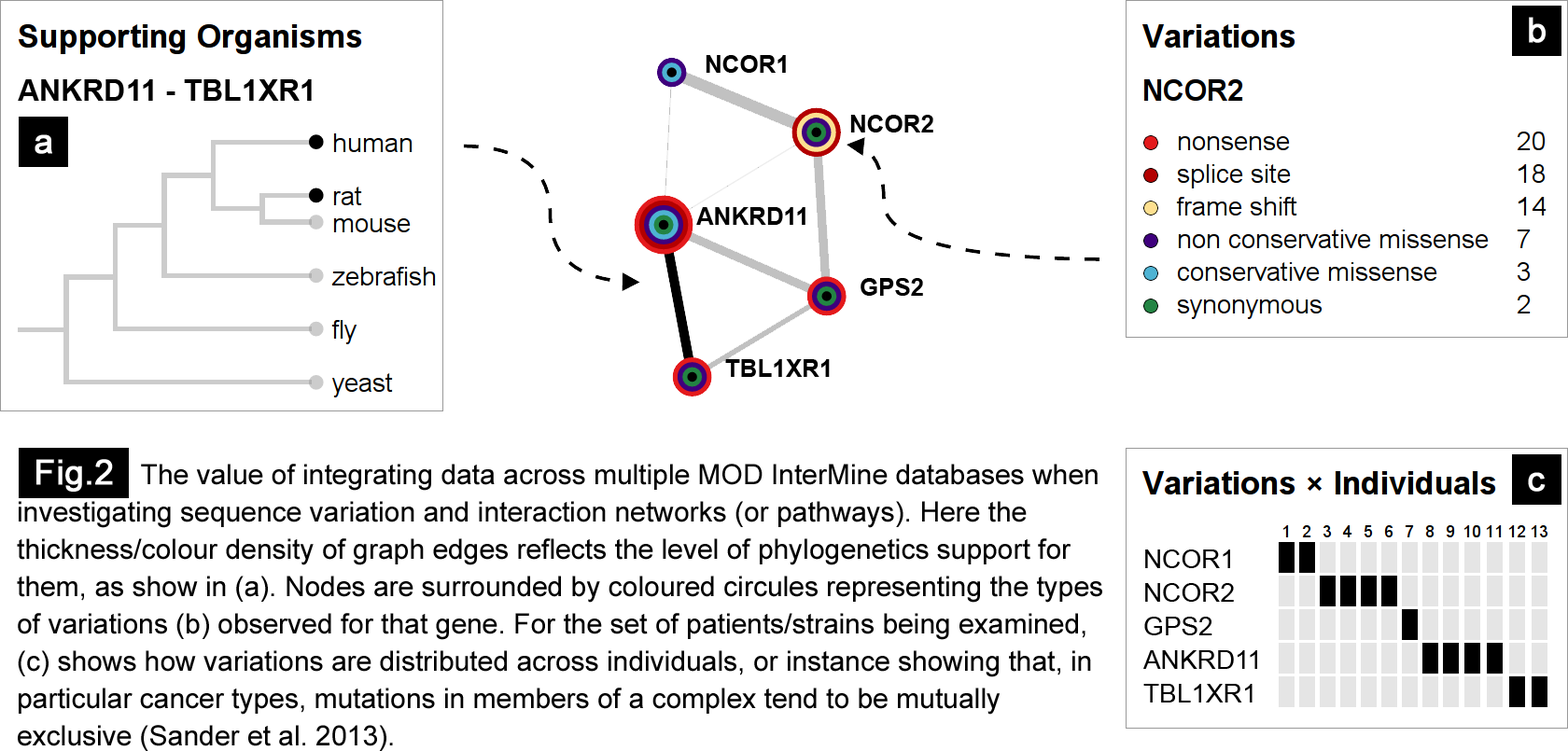
<style>
.page{position:relative;width:1568px;height:751px;background:#ffffff}
.page>*{position:absolute;margin:0}
.t1{font:34.4px "ArialMT";color:#ffffff;font-weight:bold}
.t2{font:24.3px "Arial-BoldMT";color:#000000;text-transform:uppercase}
.t3{font:29.9px "Arial-BoldMT";color:#000000;text-transform:uppercase}
.t4{font:28px/37.3px "ArialMT";color:#000000}
.t5{font:26.1px/33.6px "ArialMT";color:#000000;text-transform:uppercase}
</style>
<div class="page">
<p class="t1" style="left:1529px;top:17px;width:17px;height:26px">b</p>
<p class="t2" style="left:706px;top:55px;width:80px;height:18px">ncor1</p>
<p class="t3" style="left:18px;top:79px;width:294px;height:22px">ankrd11 - tbl1xr1</p>
<p class="t2" style="left:850px;top:115px;width:83px;height:18px">ncor2</p>
<p class="t1" style="left:35px;top:134px;width:17px;height:20px">a</p>
<p class="t2" style="left:696px;top:207px;width:109px;height:18px">ankrd11</p>
<p class="t2" style="left:861px;top:278px;width:62px;height:18px">gps2</p>
<p class="t2" style="left:725px;top:359px;width:105px;height:18px">tbl1xr1</p>
<p class="t1" style="left:36px;top:459px;width:77px;height:33px">Fig.2</p>
<p class="t4" style="left:17px;top:464px;width:1085px;height:287px">The value of integrating data across multiple MOD InterMine databases when<br>investigating sequence variation and interaction networks (or pathways). Here the<br>thickness/colour density of graph edges reflects the level of phylogenetics support for<br>them, as show in (a). Nodes are surrounded by coloured circules representing the types<br>of variations (b) observed for that gene. For the set of patients/strains being examined,<br>(c) shows how variations are distributed across individuals, or instance showing that, in<br>particular cancer types, mutations in members of a complex tend to be mutually<br>exclusive (Sander et al. 2013).</p>
<p class="t1" style="left:1528px;top:472px;width:18px;height:20px">c</p>
<p class="t5" style="left:1143px;top:550px;width:114px;height:153px">ncor1<br>ncor2<br>gps2<br>ankrd11<br>tbl1xr1</p>
</div>
